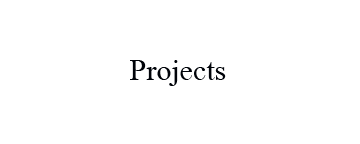
<style>
.page{position:relative;width:360px;height:144px;background:#ffffff}
.page>*{position:absolute;margin:0}
.t1{font:30px "MongolianBaiti";color:#000309}
</style>
<div class="page">
<p class="t1" style="left:130px;top:60px;width:96px;height:26px">Projects</p>
</div>
